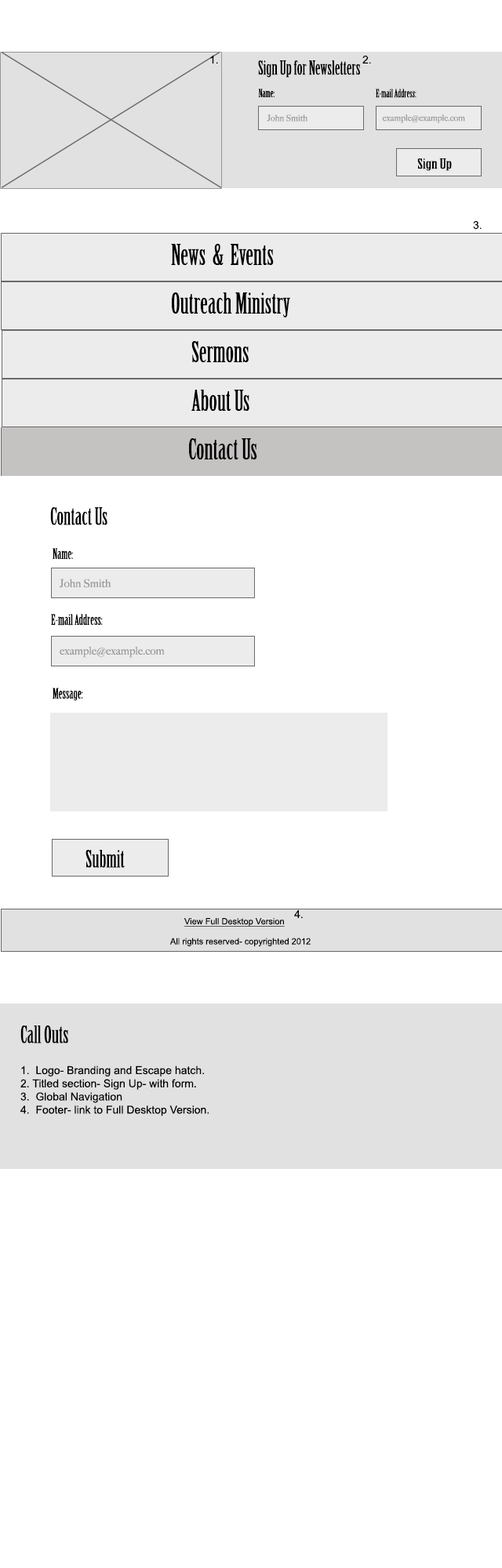
<style>
.page{position:relative;width:502px;height:1568px;background:#ffffff}
.page>*{position:absolute;margin:0}
.t1{font:11px "ArialMT";color:#000000}
.t2{font:18.8px "BirchStd";color:#000000}
.t3{font:11.1px "BirchStd";color:#000000}
.t4{font:8.7px "BigCaslon-Medium";color:#9d9999}
.t5{font:13.7px "BirchStd";color:#000000;scale:1.41 1}
.t6{font:28.2px "BirchStd";color:#000000}
.t7{font:23.5px "BirchStd";color:#000000}
.t8{font:14.1px "BirchStd";color:#000000}
.t9{font:11px "BigCaslon-Medium";color:#9d9999}
.t10{font:8.6px "ArialMT";color:#000000;text-decoration:underline}
.t11{font:8.7px "ArialMT";color:#000000}
</style>
<div class="page">
<p class="t1" style="left:210px;top:55px;width:8px;height:9px">1.</p>
<p class="t2" style="left:258px;top:60px;width:102px;height:18px">Sign Up for Newsletters</p>
<p class="t1" style="left:362px;top:55px;width:9px;height:9px">2.</p>
<p class="t3" style="left:258px;top:89px;width:16px;height:8px">Name:</p>
<p class="t3" style="left:376px;top:89px;width:40px;height:9px">E-mail Address:</p>
<p class="t4" style="left:267px;top:114px;width:40px;height:8px">John Smith</p>
<p class="t4" style="left:382px;top:114px;width:83px;height:9px">example@example.com</p>
<p class="t5" style="left:417px;top:158px;width:35px;height:13px">Sign Up</p>
<p class="t1" style="left:473px;top:220px;width:8px;height:10px">3.</p>
<p class="t6" style="left:171px;top:244px;width:103px;height:21px">News  &amp;  Events</p>
<p class="t6" style="left:172px;top:292px;width:118px;height:26px">Outreach Ministry</p>
<p class="t6" style="left:191px;top:341px;width:58px;height:21px">Sermons</p>
<p class="t6" style="left:191px;top:390px;width:58px;height:21px">About Us</p>
<p class="t6" style="left:189px;top:438px;width:68px;height:21px">Contact Us</p>
<p class="t7" style="left:50px;top:507px;width:57px;height:18px">Contact Us</p>
<p class="t8" style="left:53px;top:548px;width:20px;height:11px">Name:</p>
<p class="t9" style="left:60px;top:579px;width:51px;height:9px">John Smith</p>
<p class="t8" style="left:51px;top:614px;width:52px;height:12px">E-mail Address:</p>
<p class="t9" style="left:60px;top:646px;width:105px;height:12px">example@example.com</p>
<p class="t8" style="left:53px;top:688px;width:30px;height:13px">Message:</p>
<p class="t7" style="left:85px;top:850px;width:40px;height:18px">Submit</p>
<p class="t1" style="left:294px;top:909px;width:9px;height:9px">4.</p>
<p class="t10" style="left:184px;top:918px;width:101px;height:9px">View Full Desktop Version</p>
<p class="t11" style="left:170px;top:938px;width:140px;height:8px">All rights reserved- copyrighted 2012</p>
<p class="t7" style="left:20px;top:1025px;width:48px;height:19px">Call Outs</p>
<p class="t1" style="left:20px;top:1065px;width:189px;height:51px">1.  Logo- Branding and Escape hatch.<br>2. Titled section- Sign Up- with form.<br>3.  Global Navigation<br>4.  Footer- link to Full Desktop Version.</p>
</div>
